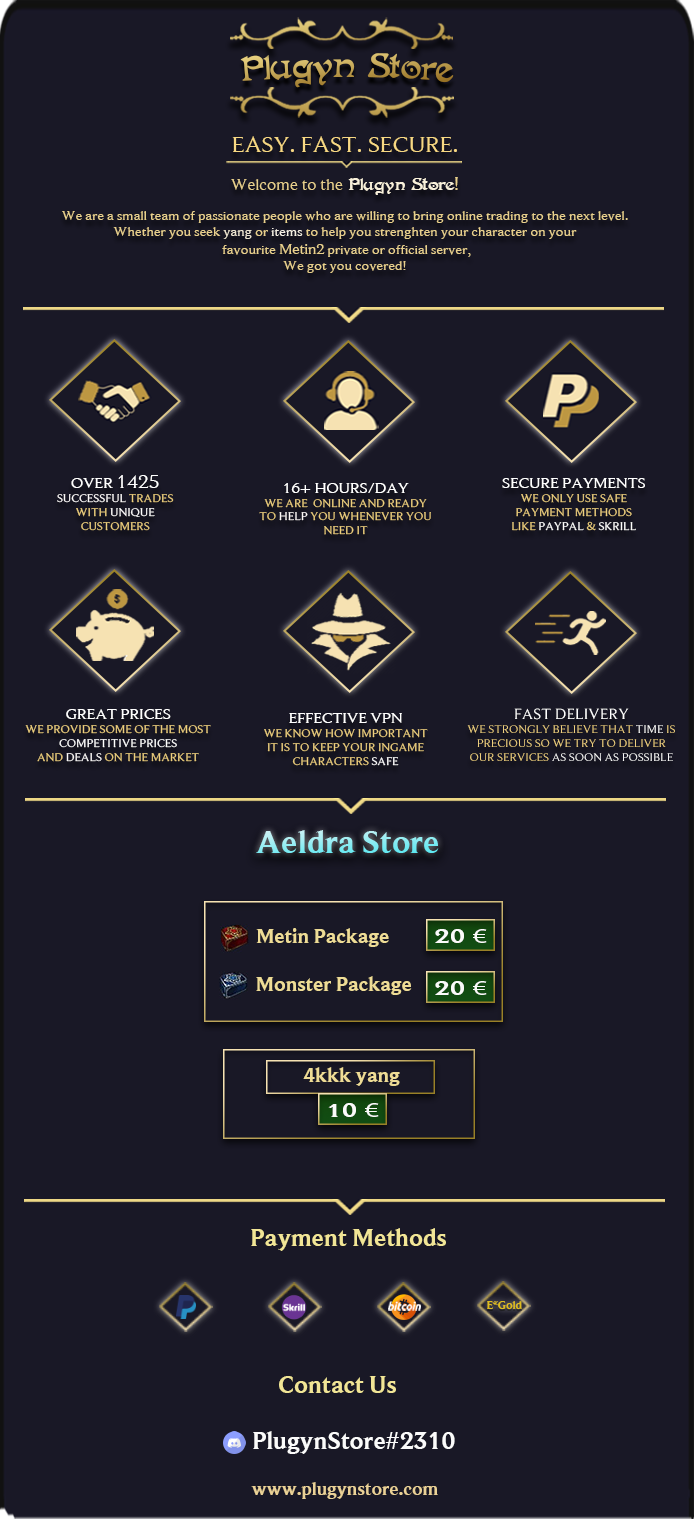
<style>
.page{position:relative;width:694px;height:1519px;background:#191826}
.page>*{position:absolute;margin:0}
.t1{font:38.2px "FantaisieArtistique"}
.t2{font:13.4px "BeaufortforLOL-Regular";color:#e8d08d;scale:1.08 1}
.t3{font:53.8px/69.1px "FantaisieArtistique";color:#cca843;scale:1.08 1}
.t4{font:23px/69.1px "BeaufortforLOL-Regular";color:#f7d883;scale:1.08 1}
.t5{font:16.1px "BeaufortforLOL-Regular";color:#e8d08d;scale:1.08 1}
.t6{font:19.2px "FantaisieArtistique";color:#f9f1db;scale:1.08 1}
.t7{font:19.2px "BeaufortforLOL-Regular";color:#e8d08d;scale:1.08 1}
.t8{font:13.4px "BeaufortforLOL-Regular";color:#eee6d2;scale:1.08 1}
.t9{font:13.4px "BeaufortforLOL-Regular";color:#f4efe3;scale:1.08 1}
.t10{font:14.6px "BeaufortforLOL-Regular";color:#e8d08d;scale:1.08 1}
.t11{font:11.5px "BeaufortforLOL-Regular";color:#edcf7e;scale:1.08 1}
.t12{font:11.5px "BeaufortforLOL-Regular";color:#dabf76;scale:1.08 1}
.t13{font:15.4px "BeaufortforLOL-Regular";color:#ffffff;scale:1.08 1}
.t14{font:19.2px "BeaufortforLOL-Regular";color:#ffffff;scale:1.08 1}
.t15{font:11.5px "BeaufortforLOL-Regular";color:#fffcfc;scale:1.08 1}
.t16{font:11.5px "BeaufortforLOL-Regular";color:#fffefe;scale:1.08 1}
.t17{font:11.5px "BeaufortforLOL-Regular";color:#fdf9f9;scale:1.08 1}
.t18{font:11.5px "BeaufortforLOL-Regular";color:#ffffff;scale:1.08 1}
.t19{font:11.5px "BeaufortforLOL-Regular";color:#fbf9f9;scale:1.08 1}
.t20{font:11.5px "BeaufortforLOL-Regular";color:#f7f7f7;scale:1.08 1}
.t21{font:33.3px "BeaufortforLOL-Bold"}
.t22{font:20.8px "BeaufortforLOL-Bold";color:#eedc96}
.t23{font:21.2px "BeaufortforLOL-Bold";color:#fbfbfa;scale:1.29 1}
.t24{font:21.2px "MyriadPro-Regular";color:#fbfbfa;scale:1.29 1}
.t25{font:25px "BeaufortforLOL-Bold";color:#f1e596}
.t26{font:11.7px "BeaufortforLOL-Bold";color:#debc1e}
.t27{font:25px "BeaufortforLOL-Bold";color:#fbfbfb}
.t28{font:18.8px "BeaufortforLOL-Bold";color:#ead196}
</style>
<div class="page">
<p class="t1" style="left:240px;top:53px;width:214px;height:35px">Plugyn Store</p>
<p class="t2" style="left:62px;top:136px;width:566px;height:137px;text-align:center"><span class="t3"><br></span><span class="t4">EASY. FAST. SECURE.<br><br></span><span class="t5">Welcome to the </span><span class="t6">Plugyn Store</span><span class="t7">!<br><br></span>We are a small team of passionate people who are willing to bring online trading to the next level.<br>Whether you seek <span class="t8">yang </span>or <span class="t9">items </span>to help you strenghten your character on your<br> favourite <span class="t10">Metin2</span> private or official server,<br>We got you covered!</p>
<p class="t11" style="left:57px;top:475px;width:117px;height:56px;text-align:center"><span class="t12"><br></span><span class="t13">OVER </span><span class="t14">1425<br></span><span class="t15">SUCCESSFUL</span> TRADES<br>WITH <span class="t16">UNIQUE</span> CUSTOMERS</p>
<p class="t11" style="left:259px;top:483px;width:172px;height:52px;text-align:center"><span class="t12"><br></span><span class="t13">16+ HOURS/DAY<br></span>WE ARE  ONLINE AND READY<br>TO <span class="t17">HELP</span> YOU WHENEVER YOU     NEED IT</p>
<p class="t11" style="left:502px;top:478px;width:143px;height:53px;text-align:center"><span class="t12"><br></span><span class="t13">SECURE PAYMENTS<br></span>WE ONLY USE SAFE<br>PAYMENT METHODS<br>LIKE <span class="t18">PAYPAL</span> &amp; <span class="t18">SKRILL</span></p>
<p class="t11" style="left:25px;top:709px;width:186px;height:53px;text-align:center"><span class="t12"><br></span><span class="t13">GREAT PRICES<br></span>WE PROVIDE SOME OF THE MOST <span class="t18">COMPETITIVE PRICES<br></span>AND <span class="t19">DEALS</span> ON THE MARKET</p>
<p class="t11" style="left:264px;top:713px;width:164px;height:53px;text-align:center"><span class="t12"><br></span><span class="t13">EFFECTIVE VPN<br></span>WE KNOW HOW IMPORTANT <br>IT IS TO KEEP YOUR INGAME <br>CHARACTERS <span class="t18">SAFE</span></p>
<p class="t11" style="left:467px;top:708px;width:208px;height:54px;text-align:center"><span class="t12"><br></span><span class="t13">FAST DELIVERY<br></span>WE STRONGLY BELIEVE THAT <span class="t18">TIME</span> IS PRECIOUS SO WE TRY TO DELIVER OUR SERVICES <span class="t20">AS SOON AS POSSIBLE</span></p>
<p class="t21" style="left:256px;top:830px;width:183px;height:23px">Aeldra Store</p>
<p class="t22" style="left:256px;top:928px;width:133px;height:19px">Metin Package</p>
<p class="t23" style="left:435px;top:929px;width:52px;height:14px">20 <span class="t24">€</span></p>
<p class="t22" style="left:256px;top:976px;width:156px;height:19px">Monster Package</p>
<p class="t23" style="left:435px;top:981px;width:52px;height:14px">20 <span class="t24">€</span></p>
<p class="t22" style="left:303px;top:1067px;width:97px;height:19px">4kkk yang</p>
<p class="t23" style="left:328px;top:1103px;width:51px;height:14px">10 <span class="t24">€</span></p>
<p class="t25" style="left:251px;top:1228px;width:195px;height:23px">Payment Methods</p>
<p class="t26" style="left:487px;top:1301px;width:35px;height:8px">E*Gold</p>
<p class="t25" style="left:279px;top:1376px;width:117px;height:17px">Contact Us</p>
<p class="t27" style="left:253px;top:1431px;width:202px;height:23px">PlugynStore#2310</p>
<p class="t28" style="left:251px;top:1482px;width:187px;height:17px">www.plugynstore.com</p>
</div>
